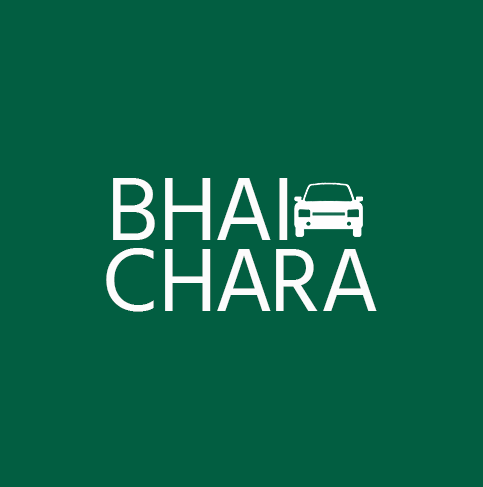
<style>
.page{position:relative;width:483px;height:487px;background:#025e41}
.page>*{position:absolute;margin:0}
.t1{font:92.3px "HindSiliguri-Regular";color:#fcfcfc}
</style>
<div class="page">
<p class="t1" style="left:113px;top:178px;width:42px;height:62px">B</p>
<p class="t1" style="left:165px;top:178px;width:46px;height:62px">H</p>
<p class="t1" style="left:217px;top:178px;width:54px;height:62px">A</p>
<p class="t1" style="left:279px;top:178px;width:9px;height:62px">I</p>
<p class="t1" style="left:106px;top:248px;width:48px;height:64px">C</p>
<p class="t1" style="left:165px;top:249px;width:46px;height:62px">H</p>
<p class="t1" style="left:217px;top:249px;width:54px;height:62px">A</p>
<p class="t1" style="left:276px;top:249px;width:42px;height:62px">R</p>
<p class="t1" style="left:323px;top:249px;width:54px;height:62px">A</p>
</div>
